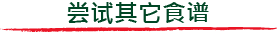
<style>
.page{position:relative;width:277px;height:32px;background:#ffffff}
.page>*{position:absolute;margin:0}
.t1{font:24px "MicrosoftJhengHeiBold";color:#004625}
</style>
<div class="page">
<p class="t1" style="left:67px;top:2px;width:142px;height:22px">尝试其它食谱</p>
</div>
